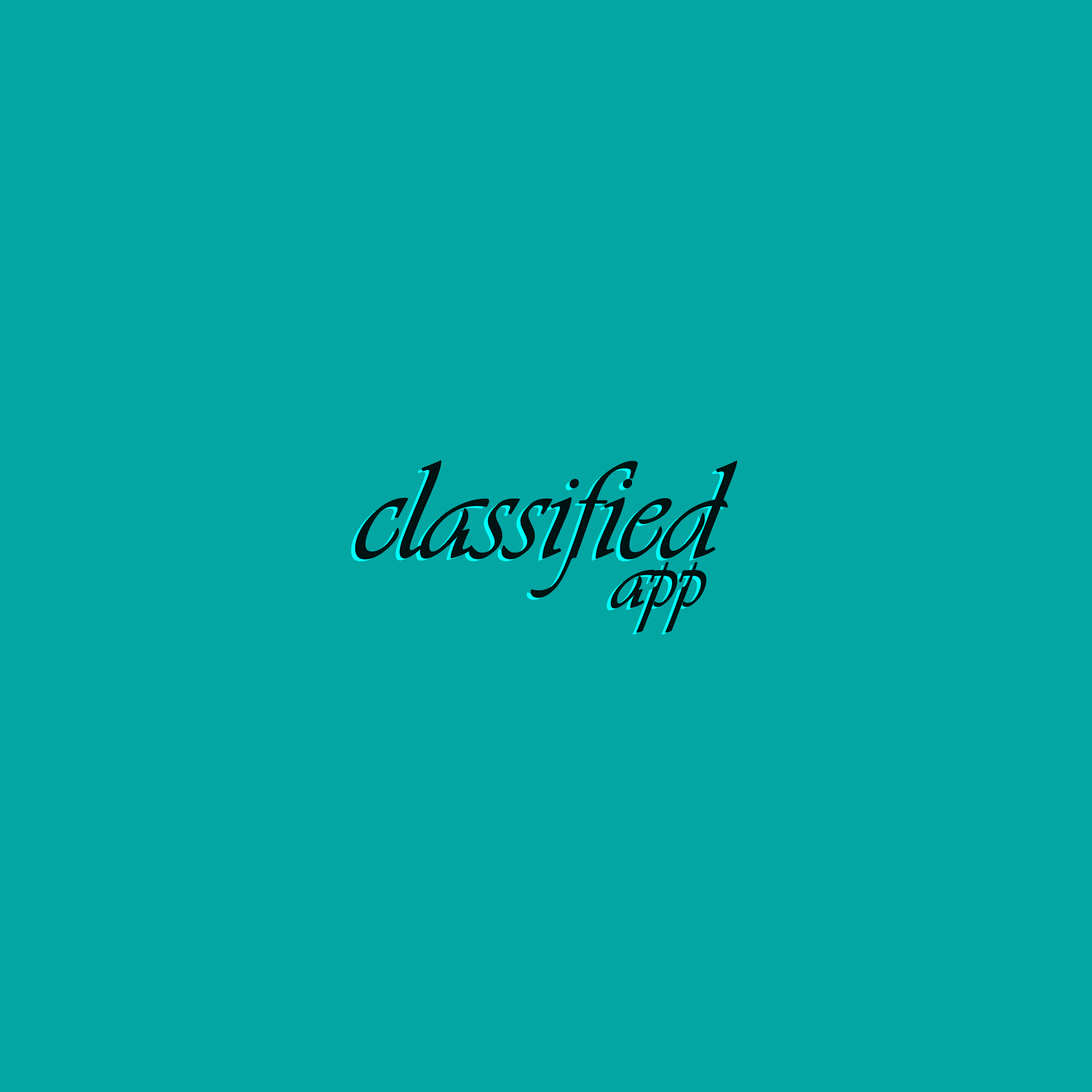
<style>
.page{position:relative;width:1092px;height:1092px;background:#03a6a3}
.page>*{position:absolute;margin:0}
.t1{font:144.6px "Vivaldii";color:#001212}
.t2{font:91.9px "Vivaldii";color:#001212}
</style>
<div class="page">
<p class="t1" style="left:356px;top:460px;width:381px;height:137px">classified</p>
<p class="t2" style="left:611px;top:562px;width:95px;height:71px">app</p>
</div>
